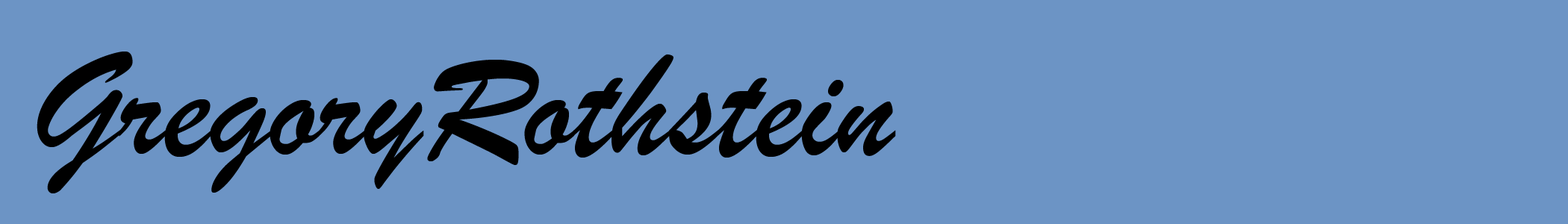
<style>
.page{position:relative;width:1568px;height:224px;background:#6c94c5}
.page>*{position:absolute;margin:0}
.t1{font:155.6px "BrushScriptMT";color:#000000}
</style>
<div class="page">
<p class="t1" style="left:37px;top:52px;width:859px;height:141px">GregoryRothstein</p>
</div>
